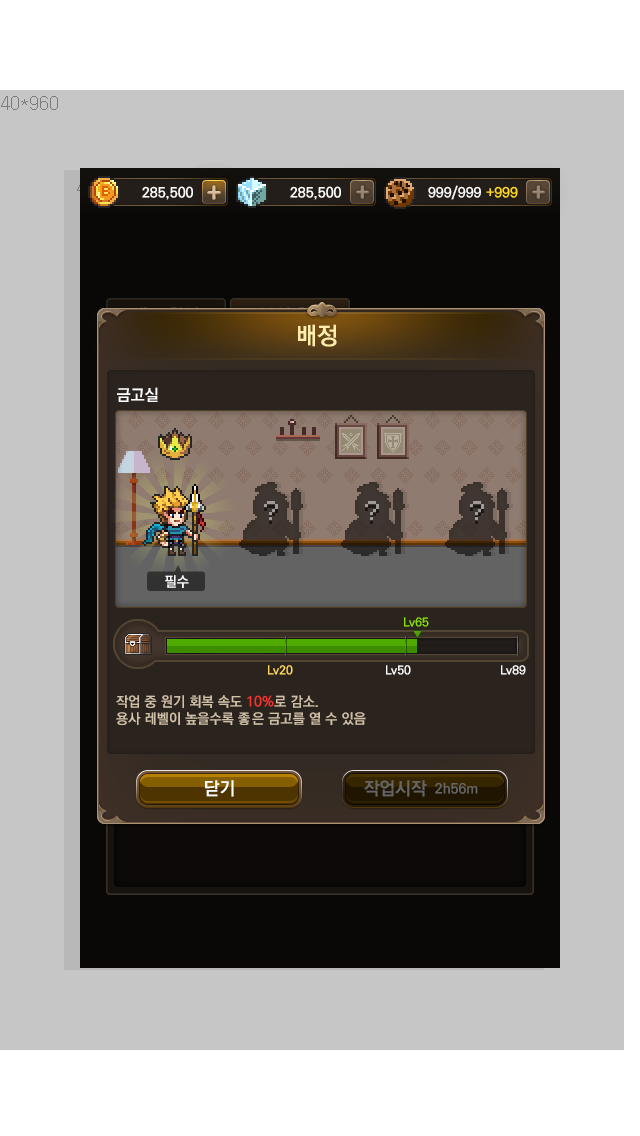
<style>
.page{position:relative;width:640px;height:1136px;background:#c6c6c6}
.page>*{position:absolute;margin:0}
.t1{font:24px "KoPubDotumBold";color:#ffedab}
.t2{font:16px "KoPubDotumBold";color:#ffffff}
.t3{font:24px "VolterGoldfish";color:#9e9b99}
.t4{font:14px "KoPubDotumBold";color:#ffffff}
.t5{font:12px "KoPubDotumBold";color:#8ae001}
.t6{font:12px "KoPubDotumBold";color:#ffd959}
.t7{font:12px "KoPubDotumBold";color:#fffefe}
.t8{font:14px "KoPubDotumBold";color:#d0c0a7}
.t9{font:14px "KoPubDotumBold";color:#f4332e}
.t10{font:18px "KoPubDotumBold";color:#ffffff}
.t11{font:18px "KoPubDotumBold";color:#666666}
.t12{font:14px "KoPubDotumBold";color:#666666}
</style>
<div class="page">
<p class="t1" style="left:298px;top:324px;width:39px;height:23px">배정</p>
<p class="t2" style="left:117px;top:387px;width:41px;height:15px">금고실</p>
<p class="t3" style="left:264px;top:501px;width:14px;height:19px">?</p>
<p class="t3" style="left:365px;top:501px;width:14px;height:19px">?</p>
<p class="t3" style="left:470px;top:501px;width:14px;height:19px">?</p>
<p class="t4" style="left:165px;top:575px;width:24px;height:13px">필수</p>
<p class="t5" style="left:404px;top:617px;width:25px;height:10px">Lv65</p>
<p class="t6" style="left:268px;top:665px;width:25px;height:10px">Lv20</p>
<p class="t7" style="left:386px;top:665px;width:25px;height:10px">Lv50</p>
<p class="t7" style="left:501px;top:665px;width:25px;height:10px">Lv89</p>
<p class="t8" style="left:116px;top:695px;width:250px;height:30px">작업 중 원기 회복 속도 <span class="t9">10%</span>로 감소.<br>용사 레벨이 높을수록 좋은 금고를 열 수 있음</p>
<p class="t10" style="left:205px;top:780px;width:29px;height:17px">닫기</p>
<p class="t11" style="left:364px;top:780px;width:63px;height:17px">작업시작</p>
<p class="t12" style="left:435px;top:782px;width:43px;height:12px">2h56m</p>
</div>
